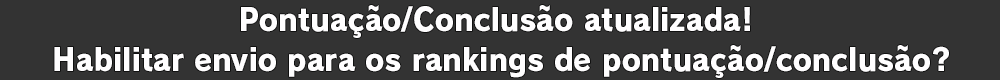
<style>
.page{position:relative;width:1000px;height:80px;background:#333333}
.page>*{position:absolute;margin:0}
.t1{font:30.7px "RodinPro-EB";color:#fffeff;scale:0.95 1}
</style>
<div class="page">
<p class="t1" style="left:241px;top:5px;width:509px;height:33px">Pontuação/Conclusão atualizada!</p>
<p class="t1" style="left:54px;top:45px;width:895px;height:33px">Habilitar envio para os rankings de pontuação/conclusão?</p>
</div>
